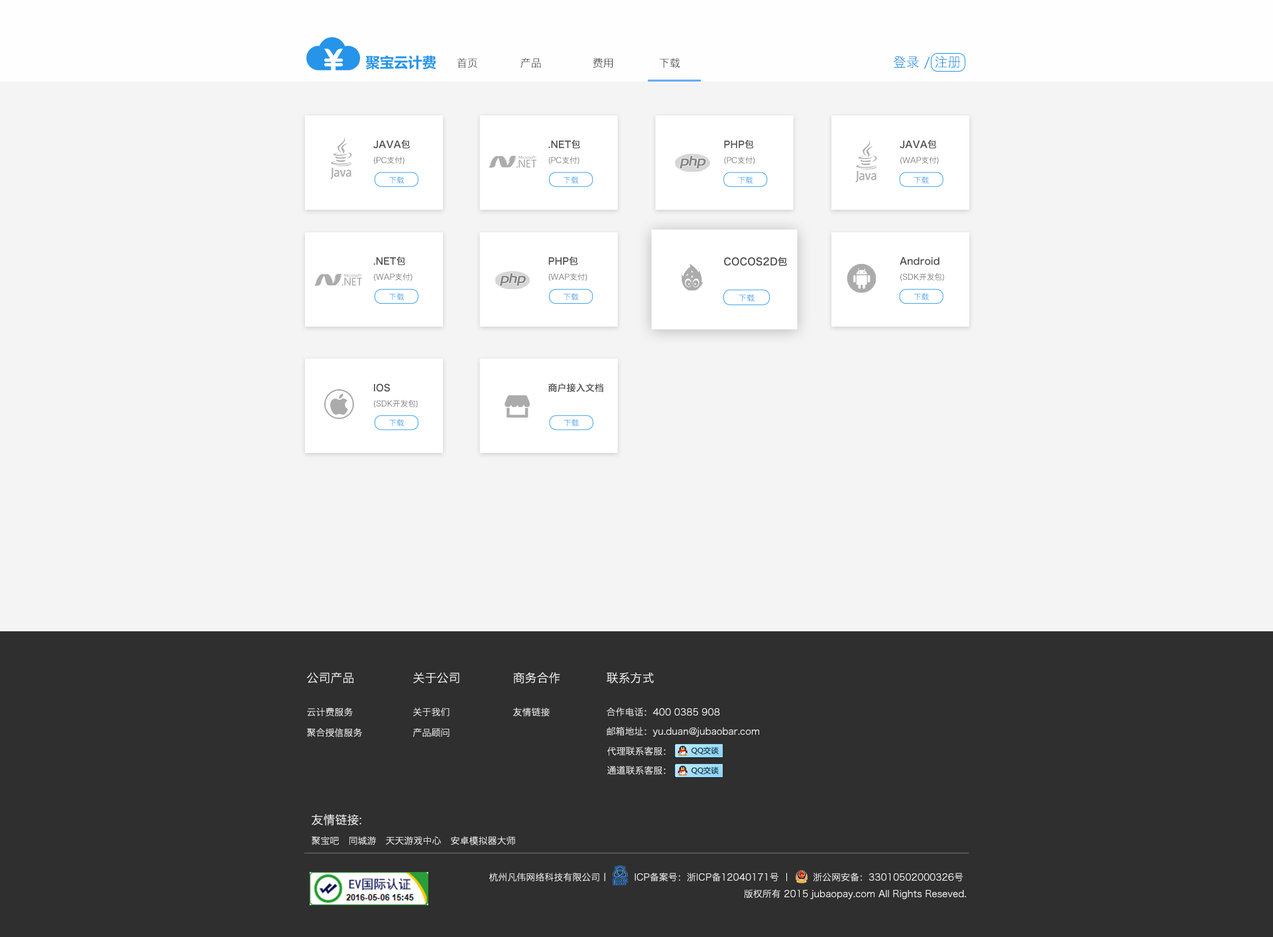
<style>
.page{position:relative;width:1273px;height:937px;background:#f4f4f4}
.page>*{position:absolute;margin:0}
.t1{font:10.6px "HiraginoSansGB-W3";color:#3b3b3b}
.t2{font:10.6px "HiraginoSansGB-W3"}
.t3{font:13.3px "HiraginoSansGB-W3";color:#2694e9}
.t4{font:9.3px "HiraginoSansGB-W6";color:#4d4d4d}
.t5{font:7.8px "HiraginoSansGB-W3";color:#6d6c6c}
.t6{font:7.8px "HiraginoSansGB-W3"}
.t7{font:7.8px "HiraginoSansGB-W3";color:#3ba2f1}
.t8{font:9.9px "HiraginoSansGB-W6";color:#4d4d4d}
.t9{font:8.2px "HiraginoSansGB-W3"}
.t10{font:11.9px "HiraginoSansGB-W3";color:#ffffff}
.t11{font:9.3px "HiraginoSansGB-W3";color:#ffffff}
</style>
<div class="page">
<p class="t1" style="left:457px;top:58px;width:20px;height:10px">首页</p>
<p class="t1" style="left:520px;top:58px;width:21px;height:10px">产品</p>
<p class="t1" style="left:593px;top:58px;width:20px;height:10px">费用</p>
<p class="t2" style="left:659px;top:58px;width:21px;height:10px">下载</p>
<p class="t3" style="left:893px;top:56px;width:68px;height:13px">登录 / 注册</p>
<p class="t4" style="left:373px;top:140px;width:37px;height:9px">JAVA包</p>
<p class="t4" style="left:548px;top:140px;width:32px;height:9px">.NET包</p>
<p class="t4" style="left:724px;top:140px;width:30px;height:9px">PHP包</p>
<p class="t4" style="left:900px;top:140px;width:36px;height:9px">JAVA包</p>
<p class="t5" style="left:374px;top:156px;width:30px;height:8px">(PC支付)</p>
<p class="t5" style="left:548px;top:156px;width:31px;height:8px">(PC支付)</p>
<p class="t5" style="left:724px;top:156px;width:31px;height:8px">(PC支付)</p>
<p class="t5" style="left:900px;top:156px;width:39px;height:8px">(WAP支付)</p>
<p class="t6" style="left:389px;top:176px;width:15px;height:8px">下载</p>
<p class="t6" style="left:564px;top:176px;width:15px;height:8px">下载</p>
<p class="t6" style="left:738px;top:176px;width:15px;height:8px">下载</p>
<p class="t7" style="left:914px;top:176px;width:15px;height:8px">下载</p>
<p class="t4" style="left:373px;top:257px;width:32px;height:8px">.NET包</p>
<p class="t4" style="left:548px;top:257px;width:30px;height:8px">PHP包</p>
<p class="t8" style="left:724px;top:257px;width:63px;height:9px">COCOS2D包</p>
<p class="t4" style="left:900px;top:257px;width:39px;height:8px">Android</p>
<p class="t5" style="left:374px;top:273px;width:38px;height:8px">(WAP支付)</p>
<p class="t5" style="left:548px;top:273px;width:39px;height:8px">(WAP支付)</p>
<p class="t5" style="left:900px;top:273px;width:44px;height:8px">(SDK开发包)</p>
<p class="t6" style="left:389px;top:293px;width:15px;height:7px">下载</p>
<p class="t6" style="left:564px;top:293px;width:15px;height:7px">下载</p>
<p class="t9" style="left:739px;top:294px;width:15px;height:8px">下载</p>
<p class="t7" style="left:914px;top:293px;width:15px;height:7px">下载</p>
<p class="t4" style="left:374px;top:383px;width:16px;height:9px">IOS</p>
<p class="t4" style="left:548px;top:383px;width:55px;height:9px">商户接入文档</p>
<p class="t5" style="left:374px;top:400px;width:44px;height:8px">(SDK开发包)</p>
<p class="t6" style="left:389px;top:419px;width:15px;height:7px">下载</p>
<p class="t7" style="left:564px;top:419px;width:15px;height:7px">下载</p>
<p class="t10" style="left:307px;top:672px;width:46px;height:12px">公司产品</p>
<p class="t10" style="left:413px;top:672px;width:46px;height:12px">关于公司</p>
<p class="t10" style="left:513px;top:672px;width:47px;height:12px">商务合作</p>
<p class="t10" style="left:607px;top:672px;width:47px;height:12px">联系方式</p>
<p class="t11" style="left:307px;top:707px;width:46px;height:10px">云计费服务</p>
<p class="t11" style="left:413px;top:707px;width:36px;height:9px">关于我们</p>
<p class="t11" style="left:513px;top:707px;width:37px;height:10px">友情链接</p>
<p class="t11" style="left:607px;top:707px;width:113px;height:9px">合作电话：400 0385 908</p>
<p class="t11" style="left:307px;top:728px;width:55px;height:9px">聚合授信服务</p>
<p class="t11" style="left:413px;top:728px;width:36px;height:9px">产品顾问</p>
<p class="t11" style="left:607px;top:727px;width:152px;height:10px">邮箱地址：yu.duan@jubaobar.com</p>
<p class="t11" style="left:607px;top:747px;width:59px;height:9px">代理联系客服：</p>
<p class="t11" style="left:607px;top:766px;width:59px;height:8px">通道联系客服：</p>
<p class="t10" style="left:312px;top:813px;width:49px;height:12px">友情链接:</p>
<p class="t11" style="left:312px;top:836px;width:203px;height:9px">聚宝吧   同城游   天天游戏中心   安卓模拟器大师</p>
<p class="t11" style="left:489px;top:872px;width:477px;height:27px;text-align:right">杭州凡伟网络科技有限公司丨        ICP备案号：浙ICP备12040171号 丨       浙公网安备：33010502000326号 <br>版权所有 2015 jubaopay.com All Rights Reseved.</p>
</div>
